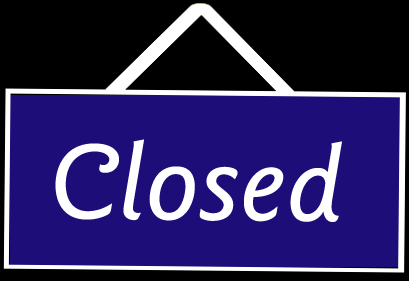
<style>
.page{position:relative;width:409px;height:281px;background:#1c0d79}
.page>*{position:absolute;margin:0}
.t1{font:111.4px "GoudySans-MediumItalic";letter-spacing:0.01em;color:#ffffff}
</style>
<div class="page">
<p class="t1" style="left:55px;top:139px;width:287px;height:83px;rotate:1deg">Closed</p>
</div>
